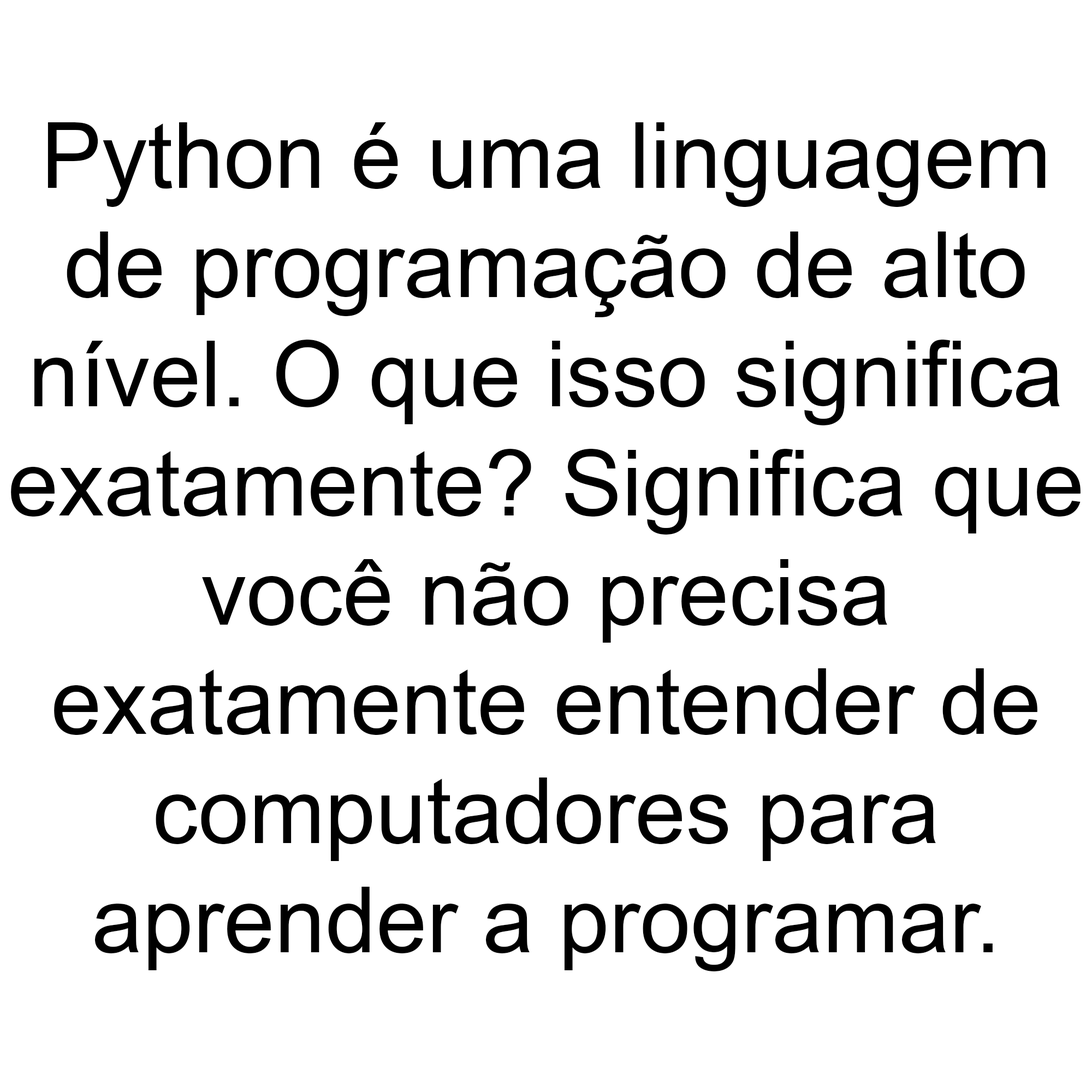
<style>
.page{position:relative;width:1092px;height:1092px;background:#ffffff}
.page>*{position:absolute;margin:0}
.t1{font:91px "ArialMT";color:#000000}
</style>
<div class="page">
<p class="t1" style="left:11px;top:122px;width:1070px;height:849px;text-align:center">Python é uma linguagem<br>de programação de alto<br>nível. O que isso significa<br>exatamente? Significa que<br>você não precisa<br>exatamente entender de<br>computadores para<br>aprender a programar.</p>
</div>
